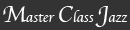
<style>
.page{position:relative;width:130px;height:30px;background:#333333}
.page>*{position:absolute;margin:0}
.t1{font:14px "Apple-Chancery";color:#ffffff}
.t2{font:24px "Apple-Chancery";color:#ffffff}
</style>
<div class="page">
<p class="t1" style="left:3px;top:6px;width:125px;height:21px"><span class="t2">M</span>aster <span class="t2">C</span>lass <span class="t2">J</span>azz</p>
</div>
